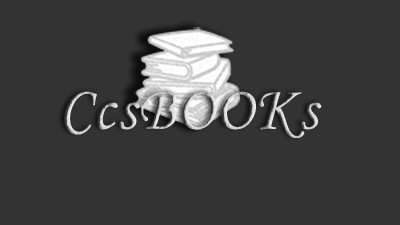
<style>
.page{position:relative;width:400px;height:225px;background:#333333}
.page>*{position:absolute;margin:0}
.t1{font:62.5px "MonotypeCorsiva";letter-spacing:0.025em}
</style>
<div class="page">
<p class="t1" style="left:64px;top:91px;width:258px;height:47px">CcsBOOKs</p>
</div>
